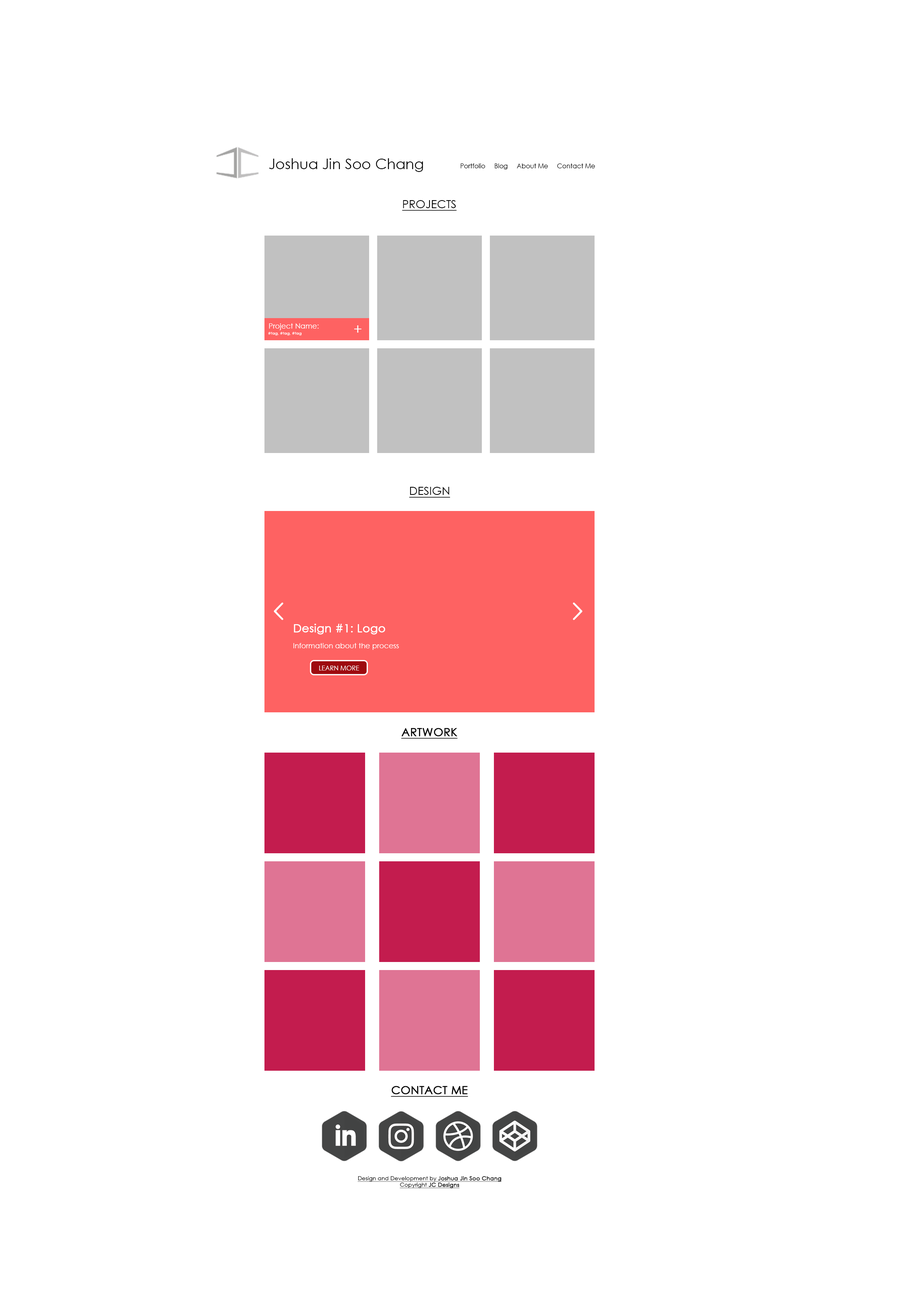
<style>
.page{position:relative;width:921px;height:1295px;background:#ffffff}
.page>*{position:absolute;margin:0}
.t1{font:14.5px "CenturyGothic";color:#000000}
.t2{font:6.4px "CenturyGothic";color:#000000}
.t3{font:11.3px "CenturyGothic";color:#000000;text-decoration:underline}
.t4{font:7.2px "CenturyGothic";color:#ffffff}
.t5{font:14.5px "CenturyGothic";color:#ffffff}
.t6{font:4px "CenturyGothic";color:#ffffff}
.t7{font:11.3px "CenturyGothic";color:#ffffff;font-weight:bold}
.t8{font:6.4px "CenturyGothic";color:#ffffff}
.t9{font:11.3px "CenturyGothic";color:#000000;font-weight:bold;text-decoration:underline}
.t10{font:5.6px/6.4px "CenturyGothic";color:#000000;text-decoration:underline}
.t11{font:5.6px/6.4px "CenturyGothic";color:#000000;font-weight:bold;text-decoration:underline}
</style>
<div class="page">
<p class="t1" style="left:269px;top:158px;width:154px;height:14px">Joshua Jin Soo Chang</p>
<p class="t2" style="left:461px;top:163px;width:134px;height:6px">Portfolio     Blog     About Me     Contact Me</p>
<p class="t3" style="left:402px;top:200px;width:55px;height:11px">PROJECTS</p>
<p class="t4" style="left:269px;top:323px;width:50px;height:7px">Project Name:</p>
<p class="t5" style="left:354px;top:325px;width:7px;height:8px">+</p>
<p class="t6" style="left:268px;top:332px;width:34px;height:3px">#tag, #tag, #tag</p>
<p class="t3" style="left:409px;top:487px;width:41px;height:11px">DESIGN</p>
<p class="t7" style="left:294px;top:624px;width:91px;height:10px">Design #1: Logo</p>
<p class="t4" style="left:293px;top:643px;width:106px;height:7px">Information about the process</p>
<p class="t8" style="left:319px;top:665px;width:40px;height:5px">LEARN MORE</p>
<p class="t9" style="left:401px;top:728px;width:57px;height:11px">ARTWORK</p>
<p class="t9" style="left:391px;top:1086px;width:77px;height:11px">CONTACT ME</p>
<p class="t10" style="left:357px;top:1176px;width:145px;height:12px;text-align:center">Design and Development by <span class="t11">Joshua Jin Soo Chang<br></span>Copyright <span class="t11">JC Designs</span></p>
</div>
